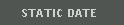
<style>
.page{position:relative;width:124px;height:25px;background:#505551}
.page>*{position:absolute;margin:0}
.t1{font:10.8px "LucidaSans-Demi";letter-spacing:0.025em;color:#ced0cd;text-transform:uppercase;scale:0.93 1}
</style>
<div class="page">
<p class="t1" style="left:22px;top:9px;width:74px;height:8px">STATIC DATE</p>
</div>
